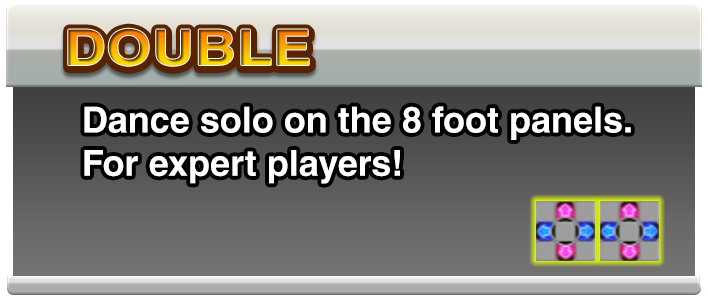
<style>
.page{position:relative;width:708px;height:308px}
.page>*{position:absolute;margin:0}
.t1{font:36px "HelveticaLTStd-Bold";color:#ffffff}
</style>
<div class="page">
<p class="t1" style="left:84px;top:106px;width:547px;height:78px">Dance solo on the 8 foot panels.<br>For expert players!</p>
</div>
